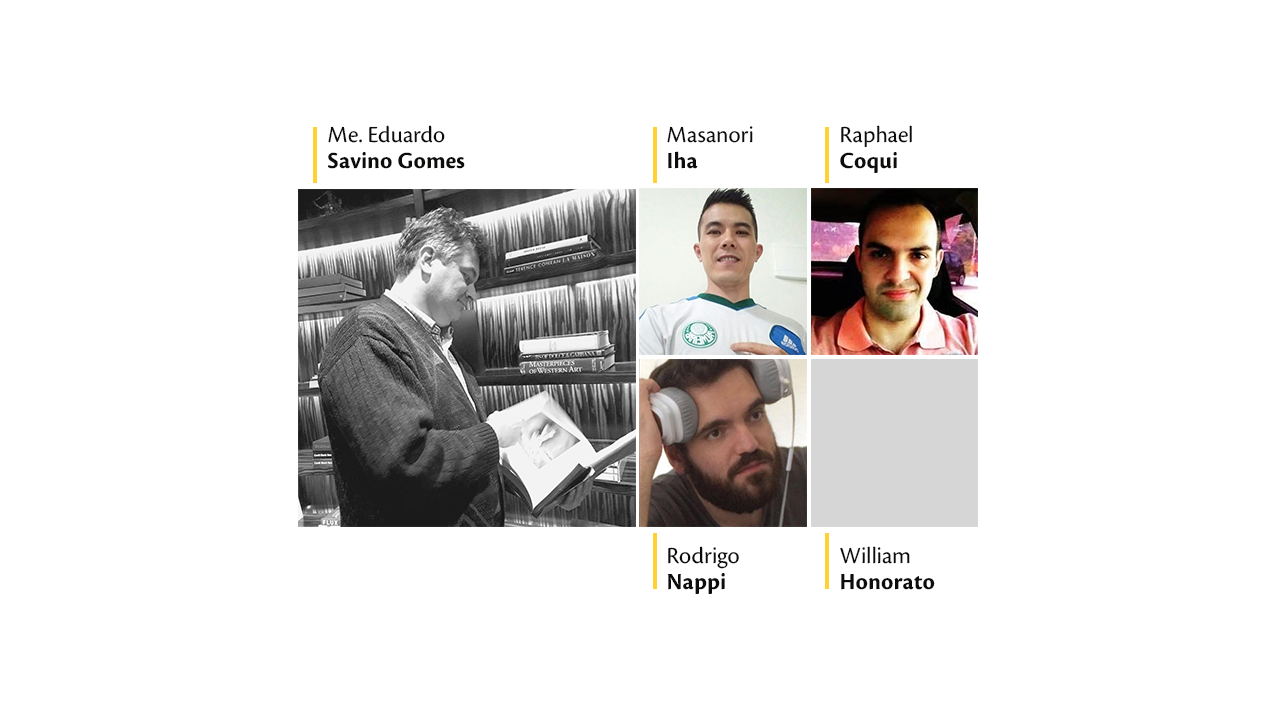
<style>
.page{position:relative;width:1280px;height:720px;background:#ffffff}
.page>*{position:absolute;margin:0}
.t1{font:24px/26px "CronosPro-Bold";color:#0e0d0c}
.t2{font:24px/26px "CronosPro-Regular";color:#0e0d0c}
</style>
<div class="page">
<p class="t1" style="left:328px;top:125px;width:137px;height:44px"><span class="t2">Me. Eduardo<br></span>Savino Gomes</p>
<p class="t2" style="left:667px;top:126px;width:86px;height:43px">Masanori<br><span class="t1">Iha</span></p>
<p class="t2" style="left:840px;top:125px;width:72px;height:48px">Raphael<br><span class="t1">Coqui</span></p>
<p class="t2" style="left:667px;top:546px;width:72px;height:48px">Rodrigo<br><span class="t1">Nappi</span></p>
<p class="t1" style="left:840px;top:546px;width:95px;height:44px"><span class="t2">William<br></span>Honorato</p>
</div>
